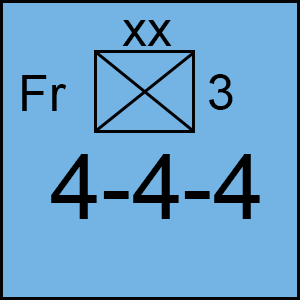
<style>
.page{position:relative;width:300px;height:300px;background:#74b4e4}
.page>*{position:absolute;margin:0}
.t1{font:50px "ArialMT";color:#000000}
.t2{font:91.7px "ArialMT";color:#000000}
</style>
<div class="page">
<p class="t1" style="left:122px;top:20px;width:50px;height:26px">xx</p>
<p class="t1" style="left:22px;top:75px;width:44px;height:36px">Fr</p>
<p class="t1" style="left:209px;top:74px;width:24px;height:36px">3</p>
<p class="t2" style="left:51px;top:154px;width:209px;height:65px">4-4-4</p>
</div>
